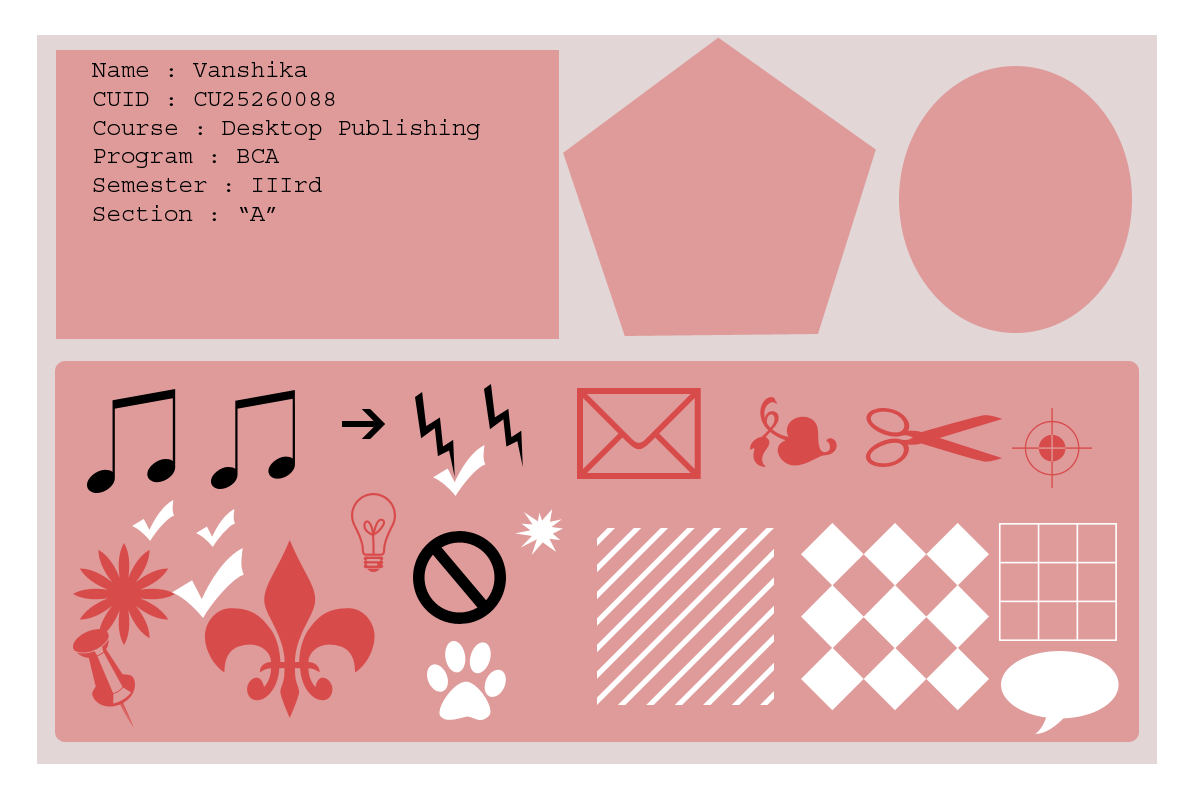
<style>
.page{position:relative;width:1200px;height:800px;background:#df9a9a}
.page>*{position:absolute;margin:0}
.t1{font:24px "Courier";color:#000000}
</style>
<div class="page">
<p class="t1" style="left:92px;top:61px;width:388px;height:160px">Name : Vanshika <br>CUID : CU25260088<br>Course : Desktop Publishing<br>Program : BCA<br>Semester : IIIrd <br>Section : “A”</p>
</div>
